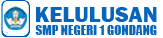
<style>
.page{position:relative;width:163px;height:38px;background:#ffffff}
.page>*{position:absolute;margin:0}
.t1{font:13.3px "Impact";color:#0965ba}
</style>
<div class="page">
<p class="t1" style="left:35px;top:25px;width:122px;height:10px">SMP NEGERI 1 GONDANG</p>
</div>
